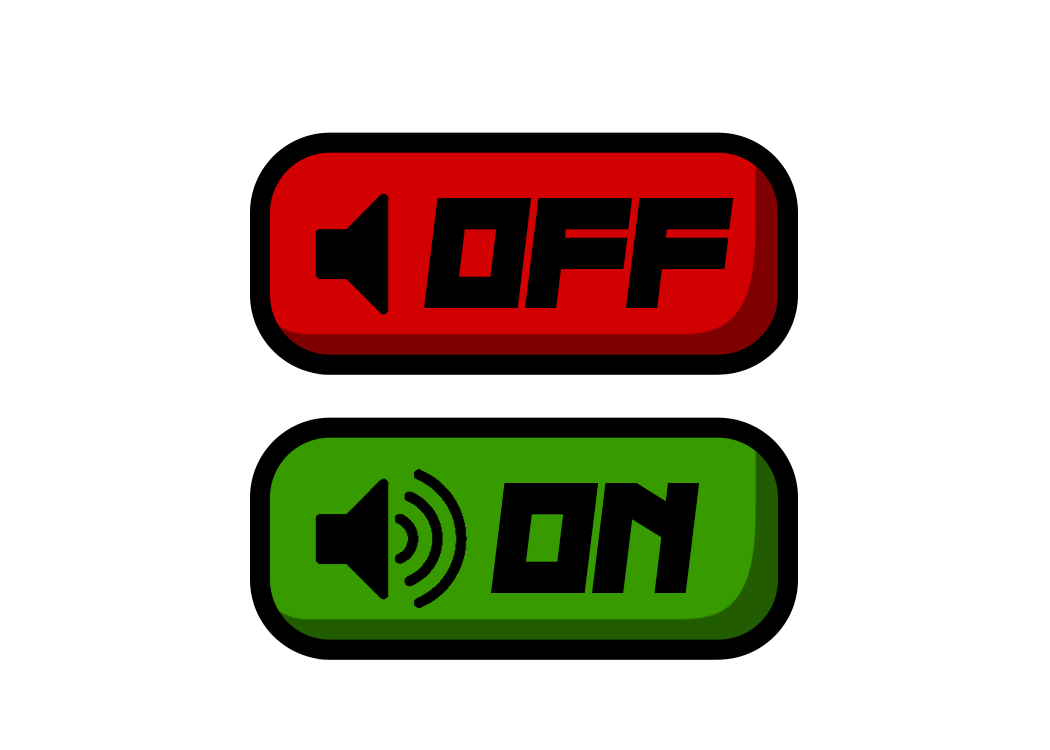
<style>
.page{position:relative;width:1050px;height:750px;background:#ffffff}
.page>*{position:absolute;margin:0}
.t1{font:159.6px "NauSea";color:#000000}
</style>
<div class="page">
<p class="t1" style="left:424px;top:198px;width:310px;height:110px">off</p>
<p class="t1" style="left:491px;top:483px;width:208px;height:110px">on</p>
</div>
